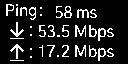
<style>
.page{position:relative;width:128px;height:64px;background:#000000}
.page>*{position:absolute;margin:0}
.t1{font:16px "GothicA1-Regular";color:#ffffff}
</style>
<div class="page">
<p class="t1" style="left:6px;top:4px;width:31px;height:16px">Ping</p>
<p class="t1" style="left:55px;top:6px;width:42px;height:13px">58 ms</p>
<p class="t1" style="left:38px;top:24px;width:76px;height:17px">53.5 Mbps</p>
<p class="t1" style="left:39px;top:44px;width:75px;height:17px">17.2 Mbps</p>
</div>
